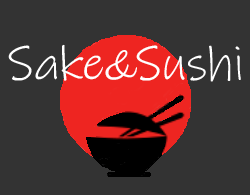
<style>
.page{position:relative;width:250px;height:195px;background:#333333}
.page>*{position:absolute;margin:0}
.t1{font:48px "InkFree";color:#ffffff}
</style>
<div class="page">
<p class="t1" style="left:8px;top:44px;width:233px;height:38px">Sake&amp;Sushi</p>
</div>
